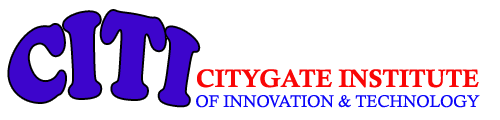
<style>
.page{position:relative;width:500px;height:120px;background:#ffffff}
.page>*{position:absolute;margin:0}
.t1{font:77.6px "CooperBlackStd";color:#3d05cc}
.t2{font:16.7px "CalistoMT";color:#0c06f9}
.t3{font:25px "CalisMTBol";color:#f90606}
</style>
<div class="page">
<p class="t1" style="left:9px;top:11px;width:190px;height:95px">CITI</p>
<p class="t2" style="left:196px;top:69px;width:284px;height:39px;text-align:center"><span class="t3">CITYGATE INSTITUTE<br></span>OF INNOVATION &amp; TECHNOLOGY</p>
</div>
